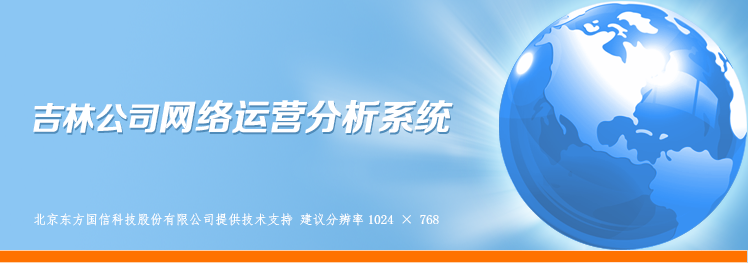
<style>
.page{position:relative;width:748px;height:263px}
.page>*{position:absolute;margin:0}
.t1{font:36px "FZZZHONGJW--GB1-0";color:#ffffff;font-weight:bold;font-style:italic}
.t2{font:32px "FZZZHONGJW--GB1-0";color:#ffffff;font-weight:bold;font-style:italic}
.t3{font:13px "·ÂËÎ";color:#ffffff}
</style>
<div class="page">
<p class="t1" style="left:33px;top:100px;width:420px;height:33px"><span class="t2">吉林公司</span>网络运营分析系统</p>
<p class="t3" style="left:34px;top:213px;width:405px;height:13px">北京东方国信科技股份有限公司提供技术支持 建议分辨率1024 × 768</p>
</div>
